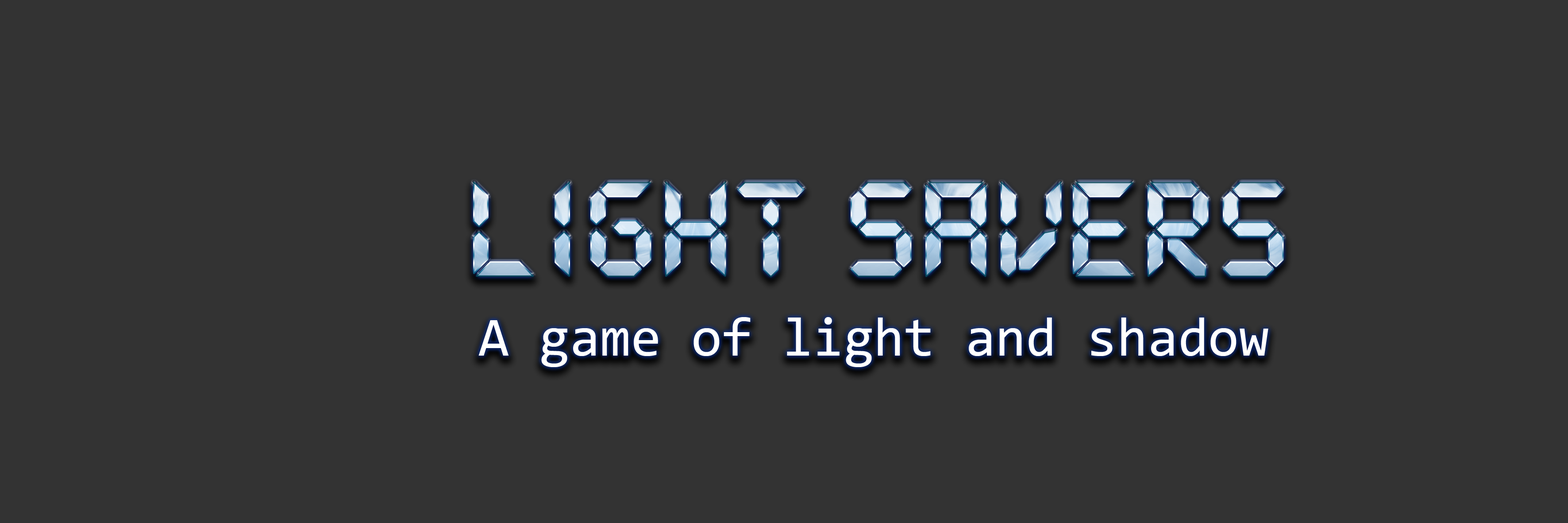
<style>
.page{position:relative;width:1568px;height:523px;background:#333333}
.page>*{position:absolute;margin:0}
.t1{font:147.5px "DS-Digital-Bold"}
.t2{font:55.3px "Consolas";color:#ffffff}
</style>
<div class="page">
<p class="t1" style="left:474px;top:182px;width:809px;height:95px">Light Savers</p>
<p class="t2" style="left:478px;top:317px;width:790px;height:50px">A game of light and shadow</p>
</div>
